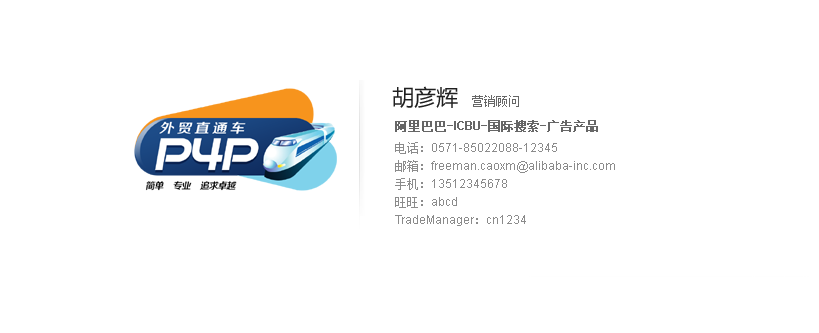
<style>
.page{position:relative;width:819px;height:333px;background:#ffffff}
.page>*{position:absolute;margin:0}
.t1{font:22px "MicrosoftYaHei";color:#202020}
.t2{font:12px "SimSun";color:#666666}
.t3{font:12px "SimSun";color:#8b8b8b}
.t4{font:12px "SimSun";color:#666666;font-weight:bold}
.t5{font:12px "Arial-BoldMT";color:#666666}
.t6{font:12px/18px "ArialMT";color:#8b8b8b}
.t7{font:12px/18px "SimSun";color:#8b8b8b}
</style>
<div class="page">
<p class="t1" style="left:392px;top:86px;width:66px;height:22px">胡彦辉</p>
<p class="t2" style="left:472px;top:95px;width:47px;height:12px"><span class="t3">  </span>营销顾问</p>
<p class="t4" style="left:395px;top:120px;width:203px;height:12px">阿里巴巴-<span class="t5">ICBU</span>-国际搜索-广告产品</p>
<p class="t6" style="left:395px;top:142px;width:220px;height:84px"><span class="t7">电话：</span>0571-85022088-12345<br><span class="t7">邮箱：</span>freeman.caoxm@alibaba-inc.com<br><span class="t7">手机：</span>13512345678<br><span class="t7">旺旺：</span>abcd<br>TradeManager<span class="t7">：</span>cn1234</p>
</div>
